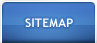
<style>
.page{position:relative;width:97px;height:43px}
.page>*{position:absolute;margin:0}
.t1{font:12px "TrebuchetMS-Bold";letter-spacing:0.01em;color:#ffffff}
</style>
<div class="page">
<p class="t1" style="left:25px;top:18px;width:48px;height:9px">SITEMAP</p>
<p class="t1" style="left:25px;top:18px;width:48px;height:9px">SITEMAP</p>
</div>
